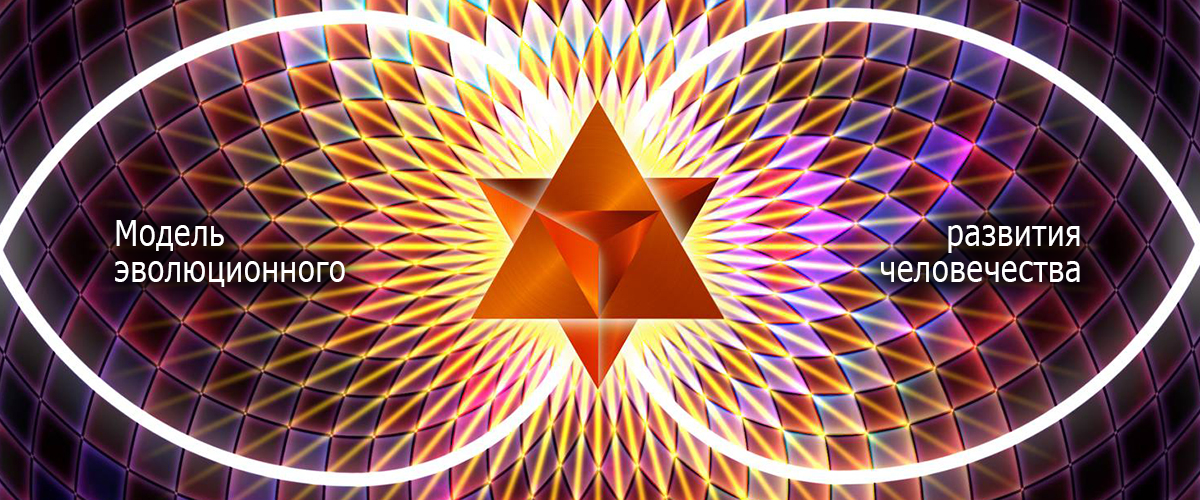
<style>
.page{position:relative;width:1200px;height:500px}
.page>*{position:absolute;margin:0}
.t1{font:36px/36px "Verdana";color:#ffffff;scale:0.8 1}
</style>
<div class="page">
<p class="t1" style="left:115px;top:220px;width:230px;height:67px">Модель<br>эволюционного</p>
<p class="t1" style="left:881px;top:225px;width:199px;height:57px;text-align:right">развития<br>человечества</p>
</div>
